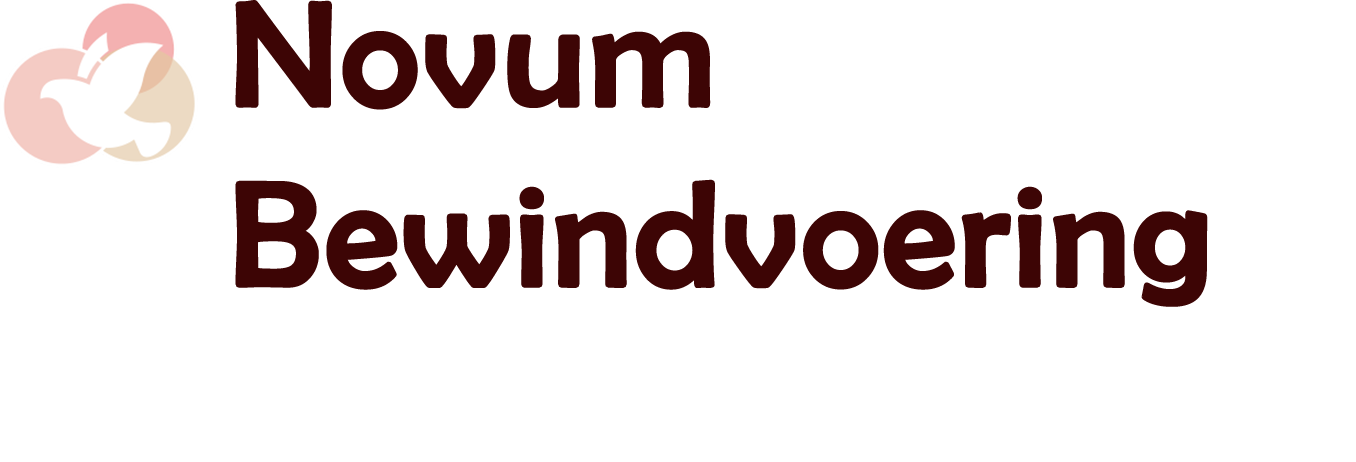
<style>
.page{position:relative;width:1356px;height:462px;background:#ffffff}
.page>*{position:absolute;margin:0}
.t1{font:150px "BerlinSansFB-Reg";color:#3d0505;font-weight:bold}
</style>
<div class="page">
<p class="t1" style="left:235px;top:0px;width:973px;height:307px">Novum<br>Bewindvoering</p>
</div>
